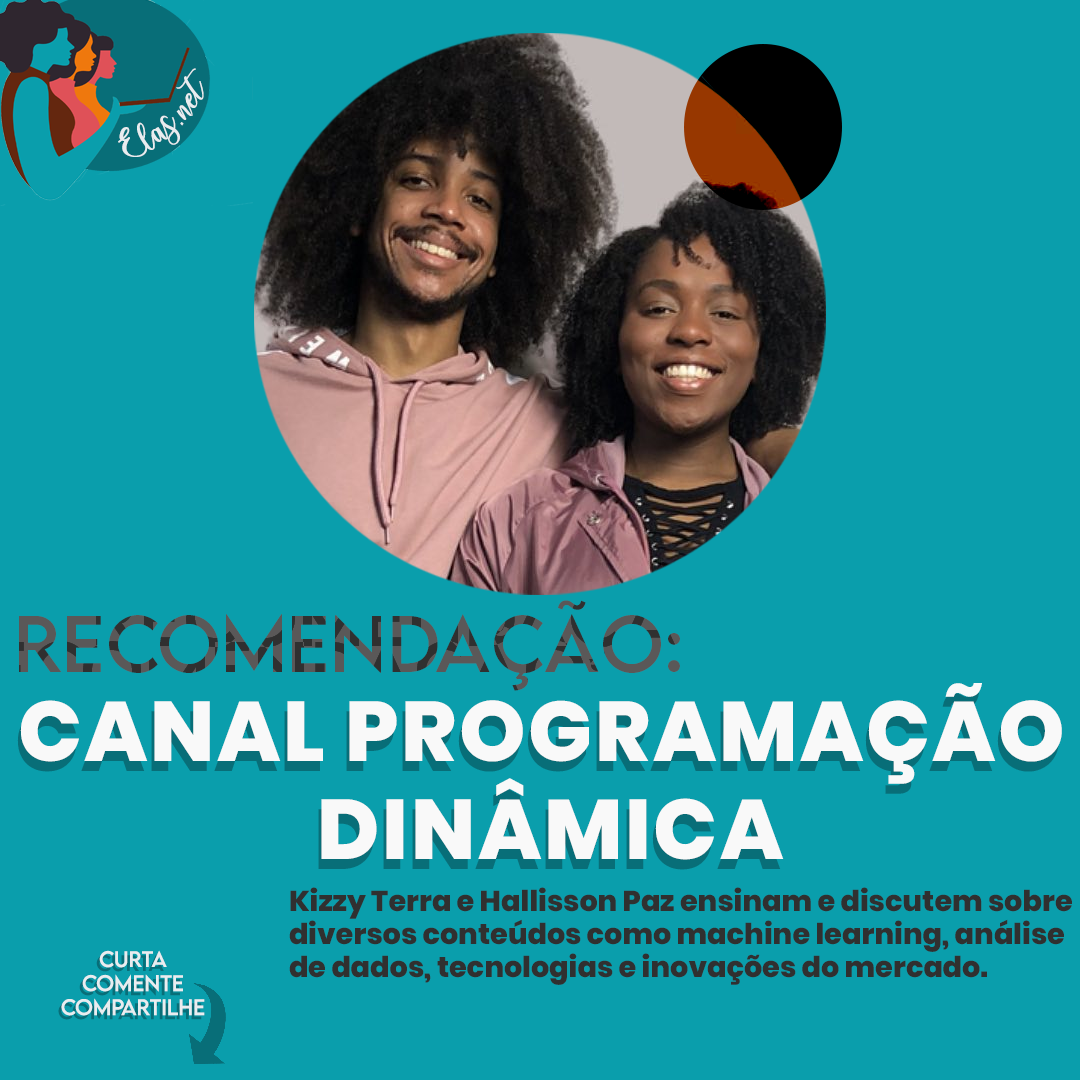
<style>
.page{position:relative;width:1080px;height:1080px;background:#0a9eac}
.page>*{position:absolute;margin:0}
.t1{font:25px "charlinda-Regular";color:#e9edf0;scale:1.18 1}
.t2{font:71.7px "LEMONMILK-Regular";letter-spacing:0.005em}
.t3{font:84.5px/98.3px "Poppins-ExtraBold";letter-spacing:0.03em;color:#f9f9f9}
.t4{font:84.5px/98.3px "Poppins-ExtraBold";letter-spacing:0.03em}
.t5{font:28.7px/33.2px "Poppins-ExtraBold";color:#303030}
.t6{font:20px "LEMONMILK-Regular";color:#e9edf0}
.t7{font:20px "LEMONMILK-Regular";color:#086e78}
</style>
<div class="page">
<p class="t1" style="left:118px;top:68px;width:86px;height:89px;rotate:-43deg">Elas.net</p>
<p class="t2" style="left:19px;top:600px;width:661px;height:91px">Recomendação:</p>
<p class="t3" style="left:20px;top:683px;width:1042px;height:177px;text-align:center">CANAL PROGRAMAÇÃO <br>DINÂMICA</p>
<p class="t4" style="left:17px;top:693px;width:1042px;height:177px;text-align:center">CANAL PROGRAMAÇÃO <br>DINÂMICA</p>
<p class="t5" style="left:289px;top:887px;width:783px;height:98px">Kizzy Terra e Hallisson Paz ensinam e discutem sobre <br>diversos conteúdos como machine learning, análise <br>de dados, tecnologias e inovações do mercado.</p>
<p class="t6" style="left:61px;top:950px;width:144px;height:66px;text-align:center">Curta<br>Comente<br>Compartilhe</p>
<p class="t7" style="left:58px;top:954px;width:144px;height:66px;text-align:center">Curta<br>Comente<br>Compartilhe</p>
</div>
